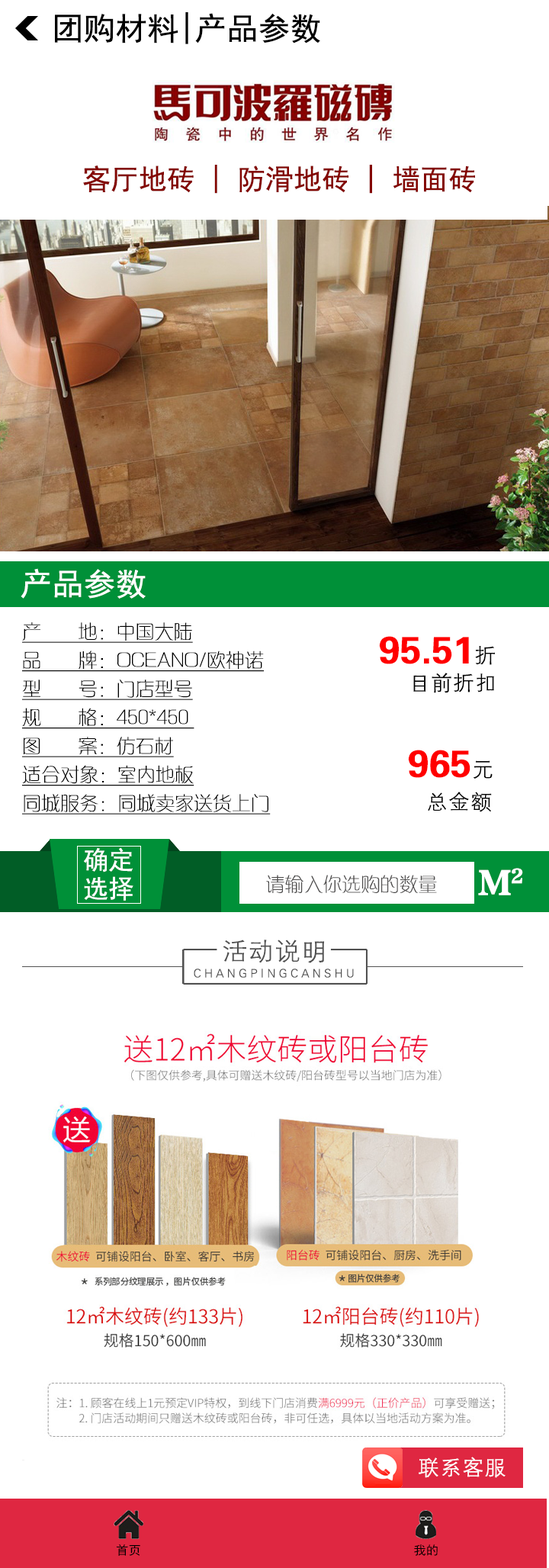
<style>
.page{position:relative;width:549px;height:1568px;background:#ffffff}
.page>*{position:absolute;margin:0}
.t1{font:31.8px "SimHei";color:#000000}
.t2{font:28.5px "SimHei";color:#840501}
.t3{font:31.8px "SimHei";color:#ffffff}
.t4{font:19.1px/28.6px "FZXQJW--GB1-0";color:#000000;text-decoration:underline}
.t5{font:38.1px "FZZYJW--GB1-0";color:#ff0000}
.t6{font:22.2px "FZXH1JW--GB1-0";color:#000000}
.t7{font:25.4px/28.6px "SimHei";color:#ffffff}
.t8{font:36px "FZTCGHJW--GB1-0";color:#ffffff}
.t9{font:19.1px "FZXQJW--GB1-0";color:#4c4b4b}
.t10{font:26.6px "FZXH1JW--GB1-0";color:#505050}
.t11{font:11.6px "FZXH1JW--GB1-0";color:#505050}
.t12{font:22.2px "FZXH1JW--GB1-0";color:#ffffff}
.t13{font:12.4px "SimHei";color:#000000}
</style>
<div class="page">
<p class="t1" style="left:55px;top:12px;width:265px;height:32px">团购材料|产品参数</p>
<p class="t2" style="left:83px;top:165px;width:392px;height:29px">客厅地砖 | 防滑地砖 | 墙面砖</p>
<p class="t3" style="left:21px;top:568px;width:125px;height:31px">产品参数</p>
<p class="t4" style="left:22px;top:622px;width:249px;height:193px">产       地：中国大陆<br>品       牌：OCEANO/欧神诺<br>型       号：门店型号<br>规       格：450*450 <br>图       案：仿石材<br>适合对象：室内地板<br>同城服务：同城卖家送货上门</p>
<p class="t5" style="left:379px;top:636px;width:116px;height:29px">95.51<span class="t6">折</span></p>
<p class="t6" style="left:413px;top:673px;width:81px;height:20px">目前折扣</p>
<p class="t5" style="left:408px;top:750px;width:85px;height:29px">965<span class="t6">元</span></p>
<p class="t6" style="left:428px;top:792px;width:64px;height:20px">总金额</p>
<p class="t7" style="left:84px;top:847px;width:49px;height:54px">确定<br>选择</p>
<p class="t8" style="left:478px;top:868px;width:45px;height:27px">M2</p>
<p class="t9" style="left:266px;top:875px;width:171px;height:18px">请输入你选购的数量</p>
<p class="t10" style="left:223px;top:940px;width:101px;height:23px">活动说明</p>
<p class="t11" style="left:194px;top:969px;width:160px;height:9px">C H A N G P I N G C A N S H U</p>
<p class="t12" style="left:419px;top:1457px;width:87px;height:21px">联系客服</p>
<p class="t13" style="left:117px;top:1544px;width:23px;height:12px">首页</p>
<p class="t13" style="left:414px;top:1544px;width:24px;height:12px">我的</p>
</div>
